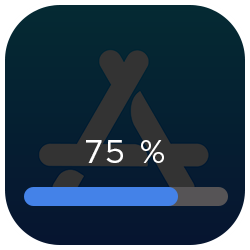
<style>
.page{position:relative;width:250px;height:250px}
.page>*{position:absolute;margin:0}
.t1{font:33.3px "Metropolis-Regular";letter-spacing:0.04em;color:#ffffff}
</style>
<div class="page">
<p class="t1" style="left:86px;top:140px;width:78px;height:23px">% 75</p>
</div>
